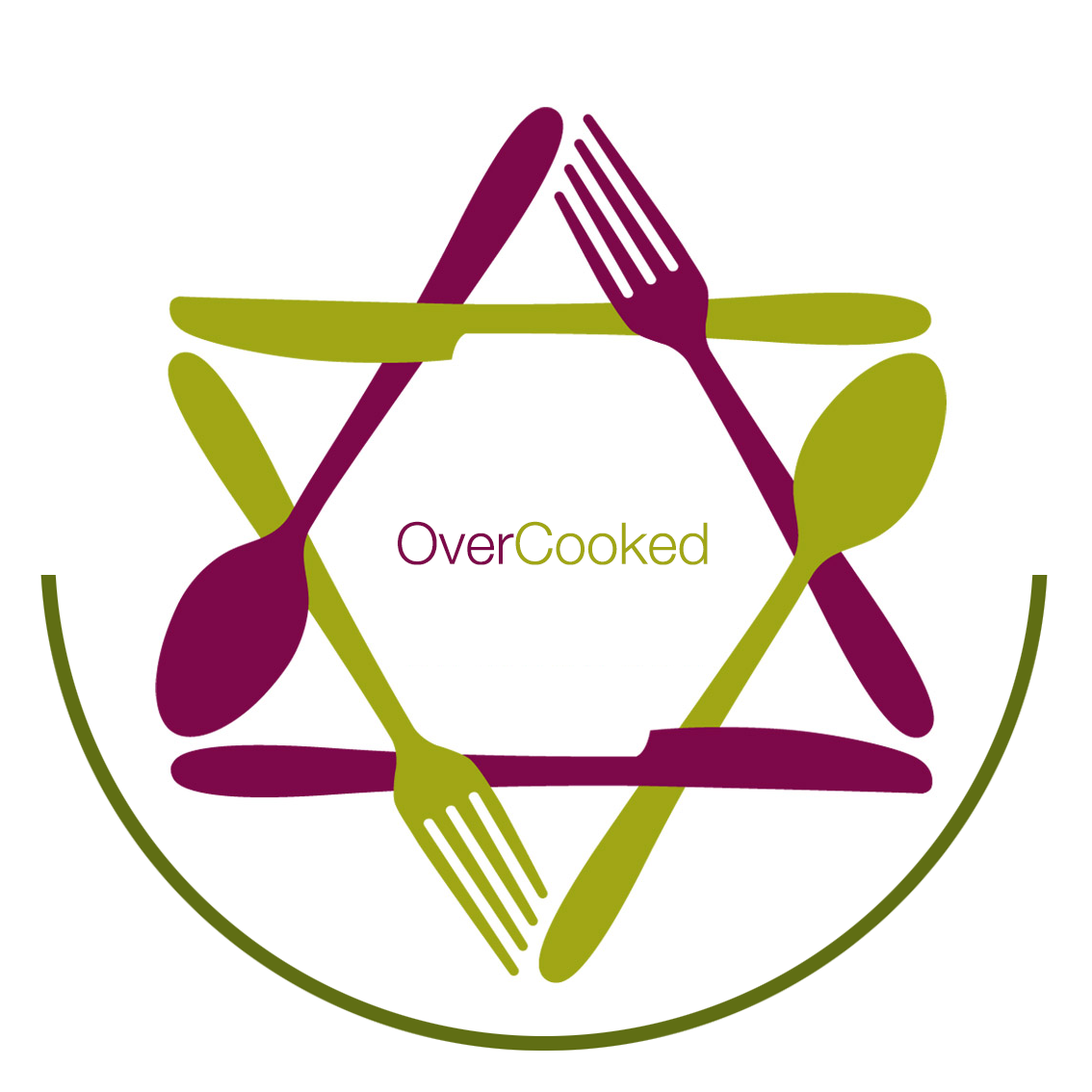
<style>
.page{position:relative;width:1092px;height:1092px;background:#ffffff}
.page>*{position:absolute;margin:0}
.t1{font:57.8px "HelveticaNeue-Light";color:#a1a616}
.t2{font:57.8px "HelveticaNeue-Light";color:#7d094a}
</style>
<div class="page">
<p class="t1" style="left:398px;top:521px;width:310px;height:44px"><span class="t2">Over</span>Cooked</p>
</div>
